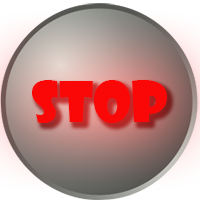
<style>
.page{position:relative;width:200px;height:200px}
.page>*{position:absolute;margin:0}
.t1{font:55px "ShowcardGothic-Reg";color:#fa0808}
</style>
<div class="page">
<p class="t1" style="left:32px;top:80px;width:135px;height:43px">stop</p>
</div>
